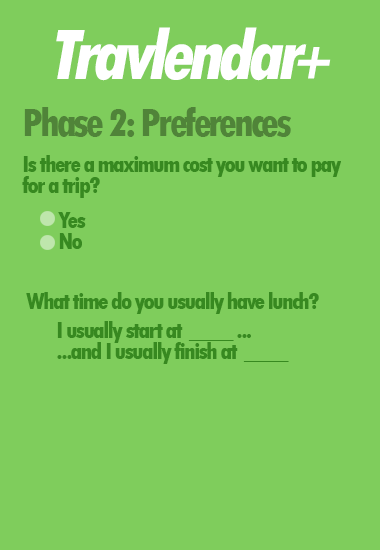
<style>
.page{position:relative;width:380px;height:550px;background:#7fcd5c}
.page>*{position:absolute;margin:0}
.t1{font:75px "TwCenMT-CondensedExtraBold";letter-spacing:-0.075em;color:#ffffff;font-style:italic}
.t2{font:58.3px "TwCenMT-CondensedExtraBold";letter-spacing:-0.075em;color:#ffffff;font-style:italic}
.t3{font:41.7px "TwCenMT-CondensedExtraBold";letter-spacing:-0.075em;color:#508439}
.t4{font:25px/20.8px "TwCenMT-CondensedExtraBold";letter-spacing:-0.075em;color:#378920}
.t5{font:25px "TwCenMT-CondensedExtraBold";letter-spacing:-0.075em;color:#378920}
</style>
<div class="page">
<p class="t1" style="left:56px;top:27px;width:251px;height:54px">Travlendar</p>
<p class="t2" style="left:297px;top:47px;width:34px;height:32px">+</p>
<p class="t3" style="left:24px;top:107px;width:267px;height:30px">Phase 2: Preferences</p>
<p class="t4" style="left:22px;top:155px;width:319px;height:43px">Is there a maximum cost you want to pay<br>for a trip?</p>
<p class="t4" style="left:58px;top:212px;width:28px;height:37px">Yes<br>No</p>
<p class="t5" style="left:26px;top:292px;width:293px;height:22px">What time do you usually have lunch?</p>
<p class="t4" style="left:57px;top:321px;width:232px;height:43px">I usually start at  ____ ...<br>...and I usually finish at  ____</p>
</div>
